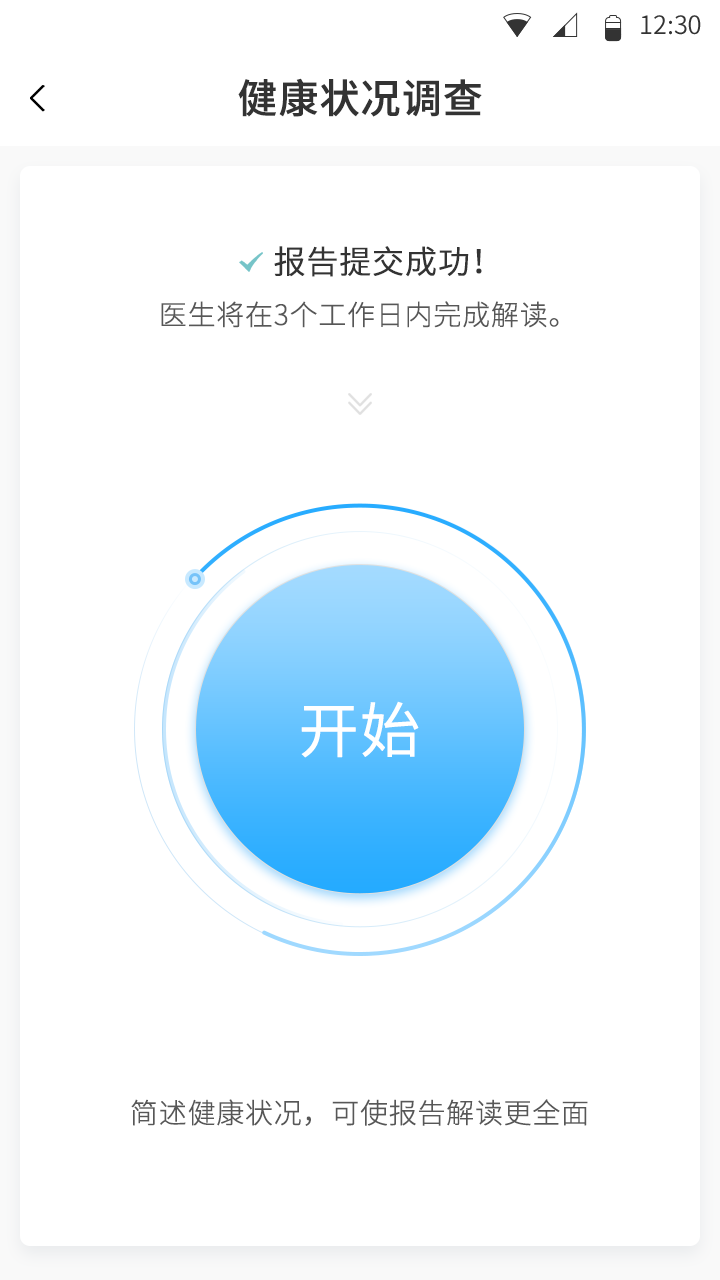
<style>
.page{position:relative;width:720px;height:1280px;background:#ffffff}
.page>*{position:absolute;margin:0}
.t1{font:25.4px "SourceHanSansCN-Normal";color:#333333}
.t2{font:40px "SourceHanSansCN-Medium";color:#333333;font-weight:bold}
.t3{font:32px "SourceHanSansCN-Normal";color:#333333;font-weight:bold}
.t4{font:28px "SourceHanSansCN-Light";color:#575757;font-weight:bold}
.t5{font:60px "SourceHanSansCN-Normal";color:#ffffff;font-weight:bold}
</style>
<div class="page">
<p class="t1" style="left:641px;top:15px;width:60px;height:20px">12:30</p>
<p class="t2" style="left:238px;top:78px;width:244px;height:39px">健康状况调查</p>
<p class="t3" style="left:274px;top:246px;width:208px;height:31px">报告提交成功！</p>
<p class="t4" style="left:161px;top:301px;width:398px;height:27px">医生将在3个工作日内完成解读。</p>
<p class="t5" style="left:301px;top:701px;width:118px;height:57px">开始</p>
<p class="t4" style="left:131px;top:1099px;width:457px;height:27px">简述健康状况，可使报告解读更全面</p>
</div>
